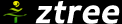
<style>
.page{position:relative;width:122px;height:24px;background:#000000}
.page>*{position:absolute;margin:0}
.t1{font:36px "Candara-Bold";color:#ffffff;font-weight:bold;font-style:italic}
</style>
<div class="page">
<p class="t1" style="left:35px;top:1px;width:85px;height:23px">ztree</p>
</div>
